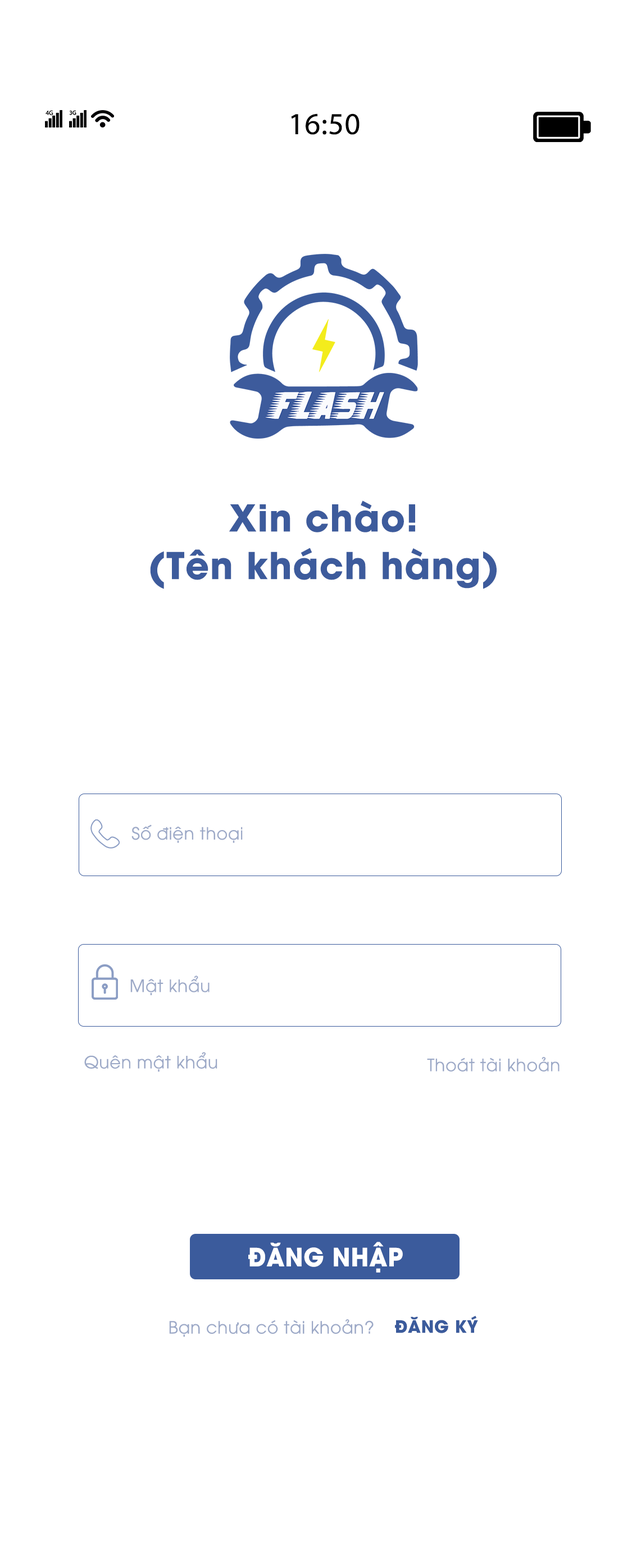
<style>
.page{position:relative;width:632px;height:1568px;background:#ffffff}
.page>*{position:absolute;margin:0}
.t1{font:30.5px "MyriadPro-Regular";letter-spacing:0.025em;color:#000000}
.t2{font:36.6px/47.6px "UTMAvoBold";letter-spacing:0.025em;color:#3d5b9c}
.t3{font:16.8px "UTM-Avo";letter-spacing:0.025em;color:#9ca9c7}
.t4{font:25px "UTMAvoBold";letter-spacing:0.025em;color:#ffffff;scale:0.94 1}
.t5{font:16.8px "UTMAvoBold";letter-spacing:0.025em;color:#3b5b9c}
</style>
<div class="page">
<p class="t1" style="left:291px;top:113px;width:68px;height:22px">16:50</p>
<p class="t2" style="left:150px;top:500px;width:346px;height:89px;text-align:center">Xin chào!<br>(Tên khách hàng)</p>
<p class="t3" style="left:131px;top:824px;width:112px;height:19px">Số điện thoại</p>
<p class="t3" style="left:130px;top:976px;width:79px;height:19px">Mật khẩu</p>
<p class="t3" style="left:84px;top:1052px;width:133px;height:20px">Quên mật khẩu</p>
<p class="t3" style="left:427px;top:1057px;width:132px;height:15px">Thoát tài khoản</p>
<p class="t4" style="left:248px;top:1242px;width:155px;height:31px">ĐĂNG NHẬP</p>
<p class="t3" style="left:169px;top:1319px;width:204px;height:18px">Bạn chưa có tài khoản?</p>
<p class="t5" style="left:395px;top:1316px;width:83px;height:17px">ĐĂNG KÝ</p>
</div>
